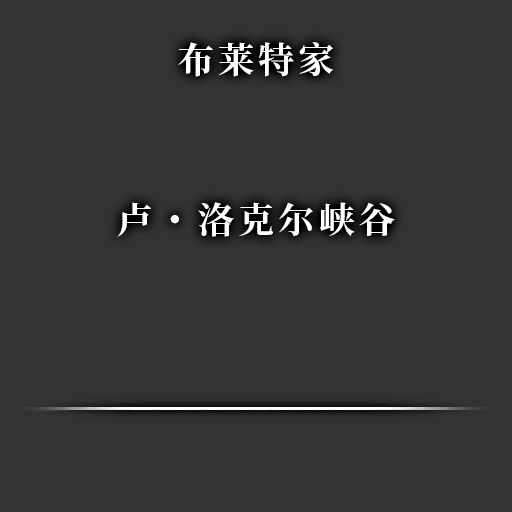
<style>
.page{position:relative;width:512px;height:512px;background:#333333}
.page>*{position:absolute;margin:0}
.t1{font:36px "SourceHanSerifCN-Bold";letter-spacing:0.12em;color:#ffffff}
</style>
<div class="page">
<p class="t1" style="left:178px;top:42px;width:155px;height:35px">布莱特家</p>
<p class="t1" style="left:117px;top:202px;width:278px;height:35px">卢・洛克尔峡谷</p>
</div>
